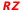
<style>
.page{position:relative;width:23px;height:12px;background:#ffffff}
.page>*{position:absolute;margin:0}
.t1{font:12px "SegoeUI-BoldItalic";letter-spacing:0.1em;color:#ff0000}
</style>
<div class="page">
<p class="t1" style="left:1px;top:0px;width:19px;height:10px">RZ</p>
</div>
